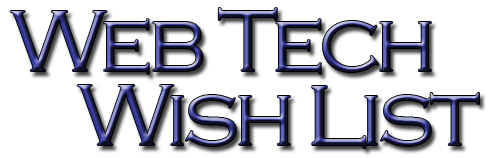
<style>
.page{position:relative;width:492px;height:158px;background:#ffffff}
.page>*{position:absolute;margin:0}
.t1{font:90px "CopperplateGothic-Light";letter-spacing:-0.06em}
.t2{font:108.1px "CopperplateGothic-Light";letter-spacing:-0.06em}
</style>
<div class="page">
<p class="t1" style="left:10px;top:8px;width:421px;height:66px">Web Tech</p>
<p class="t1" style="left:77px;top:85px;width:402px;height:63px">Wish <span class="t2">l</span>ist</p>
</div>
